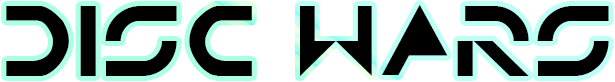
<style>
.page{position:relative;width:615px;height:82px;background:#ffffff}
.page>*{position:absolute;margin:0}
.t1{font:72px "TRON";color:#000000}
</style>
<div class="page">
<p class="t1" style="left:6px;top:5px;width:603px;height:72px">Disc Wars</p>
</div>
